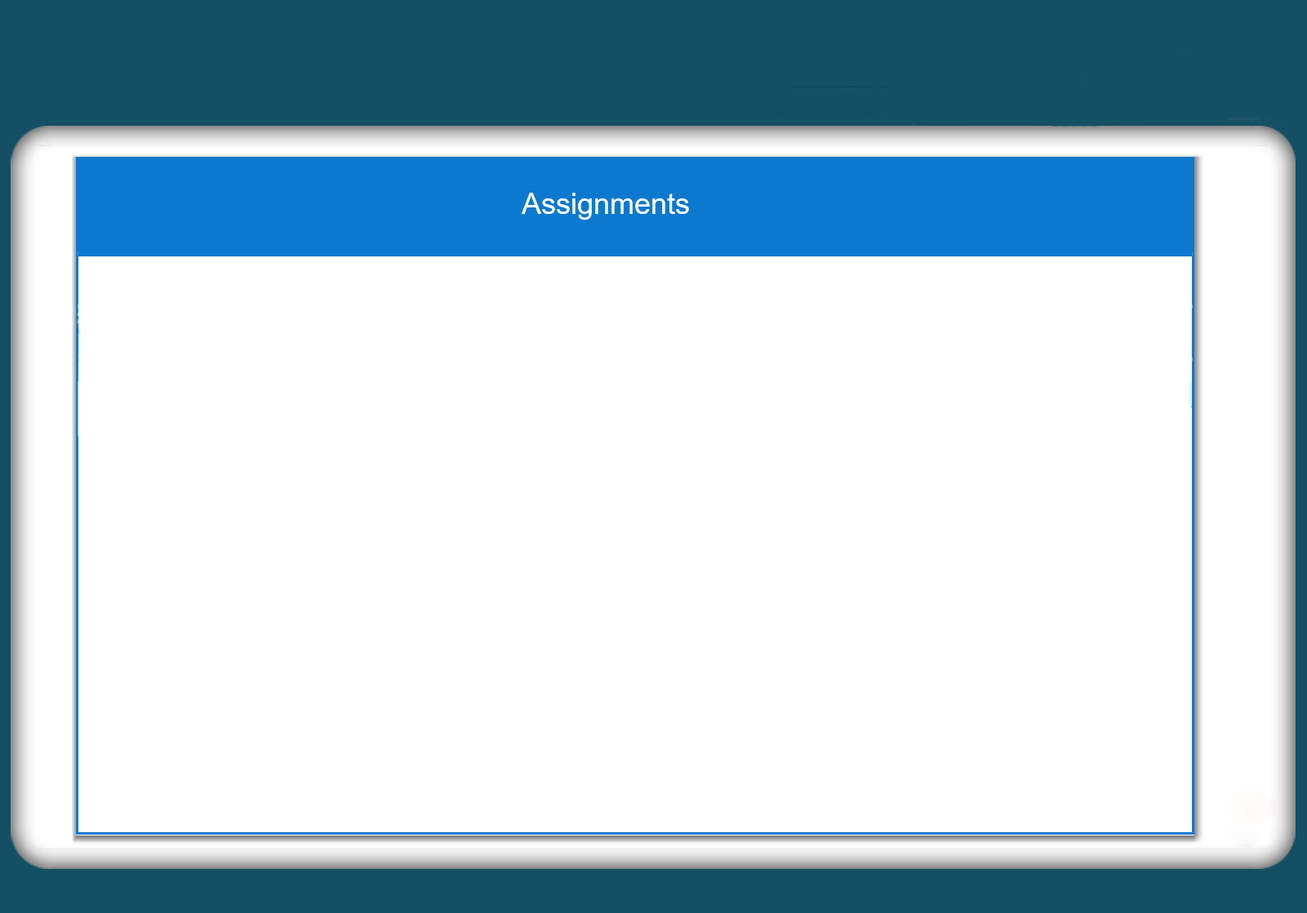
<style>
.page{position:relative;width:1307px;height:913px;background:#ffffff}
.page>*{position:absolute;margin:0}
.t1{font:29.4px "ArialMT";color:#ffffff}
</style>
<div class="page">
<p class="t1" style="left:522px;top:193px;width:167px;height:27px">Assignments</p>
</div>
